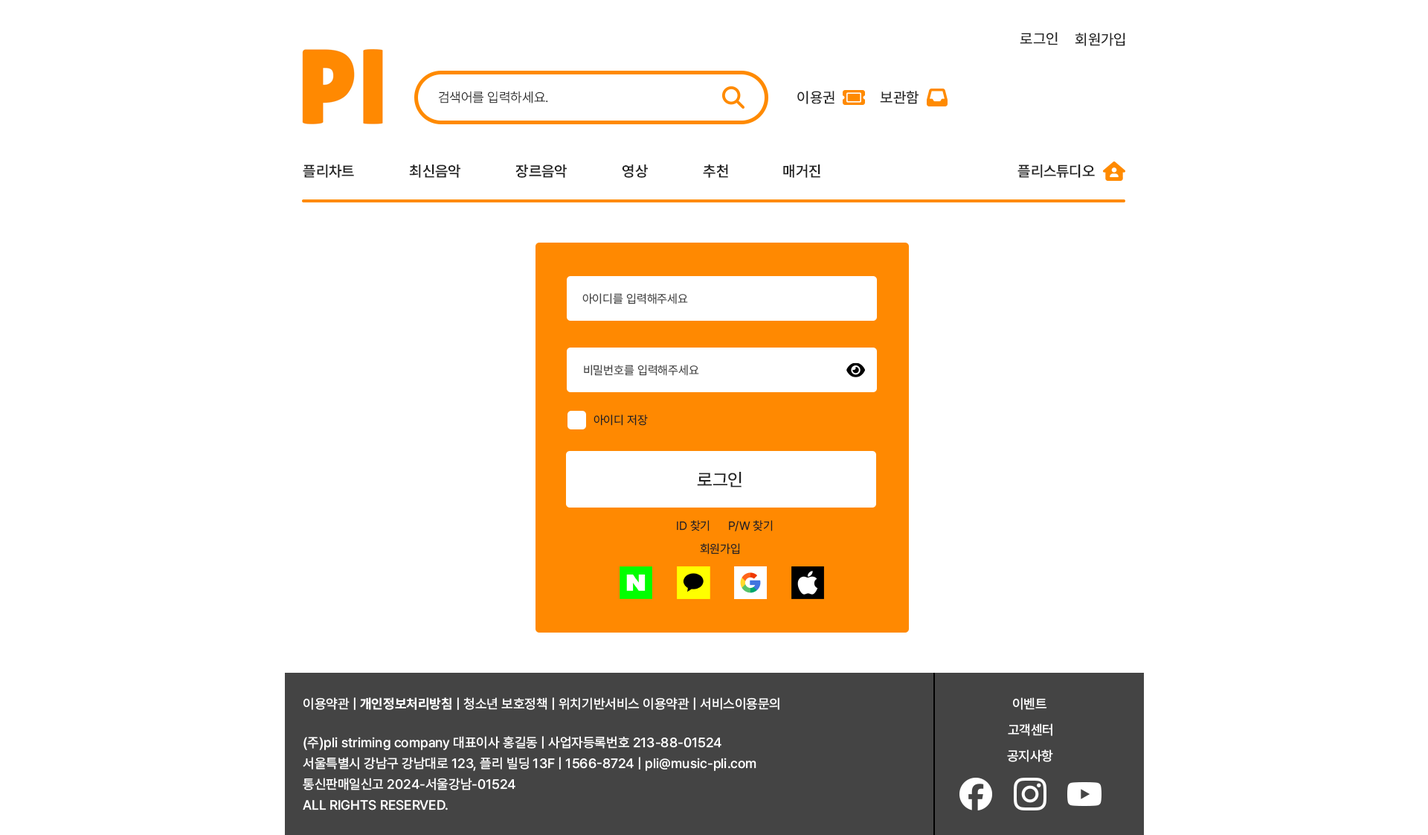
<style>
.page{position:relative;width:1428px;height:835px;background:#ffffff}
.page>*{position:absolute;margin:0}
.t1{font:14.9px "Pretendard-Medium";color:#222222}
.t2{font:13.4px "Pretendard-Light";color:#222222}
.t3{font:14.9px "Pretendard-SemiBold";color:#222222}
.t4{font:11.9px "Pretendard-Regular";color:#444444}
.t5{font:11.9px "Pretendard-Regular";color:#222222}
.t6{font:17.9px "Pretendard-Medium";color:#222222}
.t7{font:13.4px "Pretendard-Medium";color:#ffffff}
.t8{font:13.4px "Pretendard-Bold";color:#ffffff}
.t9{font:13.4px/20.8px "Pretendard-Medium";color:#ffffff}
</style>
<div class="page">
<p class="t1" style="left:1020px;top:32px;width:38px;height:13px">로그인</p>
<p class="t1" style="left:1075px;top:33px;width:51px;height:13px">회원가입</p>
<p class="t2" style="left:438px;top:91px;width:110px;height:12px">검색어를 입력하세요.</p>
<p class="t1" style="left:798px;top:91px;width:37px;height:13px">이용권</p>
<p class="t1" style="left:880px;top:91px;width:39px;height:13px">보관함</p>
<p class="t3" style="left:303px;top:164px;width:51px;height:14px">플리차트</p>
<p class="t3" style="left:409px;top:164px;width:52px;height:14px">최신음악</p>
<p class="t3" style="left:516px;top:164px;width:51px;height:14px">장르음악</p>
<p class="t3" style="left:622px;top:164px;width:26px;height:14px">영상</p>
<p class="t3" style="left:703px;top:164px;width:25px;height:14px">추천</p>
<p class="t3" style="left:783px;top:164px;width:38px;height:14px">매거진</p>
<p class="t3" style="left:1018px;top:164px;width:77px;height:14px">플리스튜디오</p>
<p class="t4" style="left:583px;top:293px;width:105px;height:11px">아이디를 입력해주세요</p>
<p class="t4" style="left:584px;top:365px;width:115px;height:11px">비밀번호를 입력해주세요</p>
<p class="t5" style="left:594px;top:414px;width:54px;height:12px">아이디 저장</p>
<p class="t6" style="left:697px;top:472px;width:45px;height:15px">로그인</p>
<p class="t5" style="left:677px;top:520px;width:33px;height:11px">ID 찾기</p>
<p class="t5" style="left:729px;top:520px;width:44px;height:11px">P/W 찾기</p>
<p class="t5" style="left:700px;top:543px;width:40px;height:11px">회원가입</p>
<p class="t7" style="left:304px;top:697px;width:476px;height:13px">이용약관 | <span class="t8">개인정보처리방침</span> | 청소년 보호정책 | 위치기반서비스 이용약관 | 서비스이용문의</p>
<p class="t7" style="left:1013px;top:697px;width:35px;height:13px">이벤트</p>
<p class="t7" style="left:1008px;top:723px;width:45px;height:13px">고객센터</p>
<p class="t9" style="left:303px;top:736px;width:454px;height:74px">(주)pli striming company 대표이사 홍길동 | 사업자등록번호 213-88-01524<br>서울특별시 강남구 강남대로 123, 플리 빌딩 13F | 1566-8724 | pli@music-pli.com<br>통신판매일신고 2024-서울강남-01524      <br>ALL RIGHTS RESERVED.</p>
<p class="t7" style="left:1007px;top:749px;width:46px;height:13px">공지사항</p>
</div>
